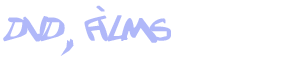
<style>
.page{position:relative;width:300px;height:60px;background:#ffffff}
.page>*{position:absolute;margin:0}
.t1{font:60px "Texted'critureLanfeust";color:#b0b8f9}
</style>
<div class="page">
<p class="t1" style="left:3px;top:5px;width:168px;height:51px">dvd, films</p>
</div>
